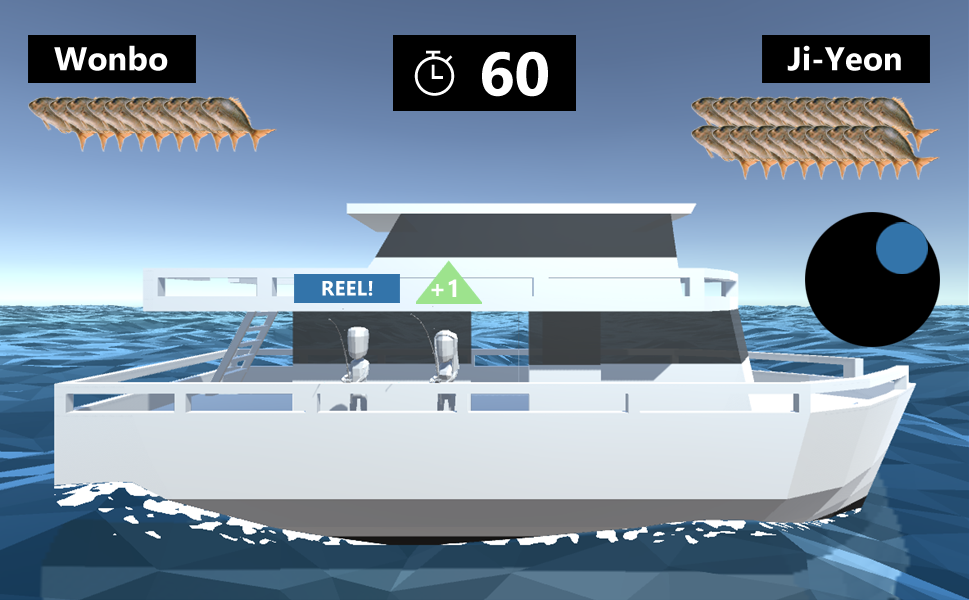
<style>
.page{position:relative;width:969px;height:600px}
.page>*{position:absolute;margin:0}
.t1{font:33.1px "SegoeUI-Bold";color:#ffffff}
.t2{font:61.5px "SegoeUI-Bold";color:#ffffff}
.t3{font:20.8px "SegoeUI-Bold";color:#ffffff}
.t4{font:24.7px "SegoeUI-Bold";color:#ffffff}
</style>
<div class="page">
<p class="t1" style="left:54px;top:45px;width:114px;height:26px">Wonbo</p>
<p class="t2" style="left:482px;top:51px;width:66px;height:46px">60</p>
<p class="t1" style="left:787px;top:45px;width:114px;height:26px">Ji-Yeon</p>
<p class="t3" style="left:322px;top:281px;width:51px;height:15px">REEL!</p>
<p class="t4" style="left:431px;top:279px;width:26px;height:18px">+1</p>
</div>
